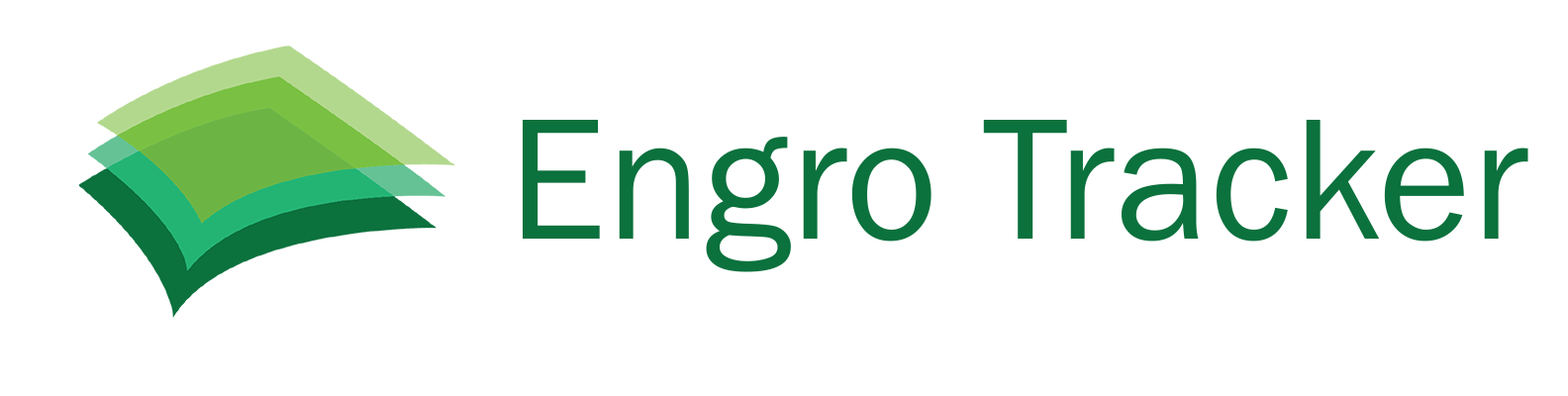
<style>
.page{position:relative;width:1568px;height:396px;background:#ffffff}
.page>*{position:absolute;margin:0}
.t1{font:178.2px "FranklinGothic-Book";color:#0b713d}
</style>
<div class="page">
<p class="t1" style="left:523px;top:120px;width:1005px;height:152px">Engro Tracker</p>
</div>
